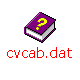
<style>
.page{position:relative;width:80px;height:80px;background:#ffffff}
.page>*{position:absolute;margin:0}
.t1{font:14px "MSReferenceSansSerif";color:#ff0000}
</style>
<div class="page">
<p class="t1" style="left:7px;top:47px;width:65px;height:11px">cvcab.dat</p>
</div>
